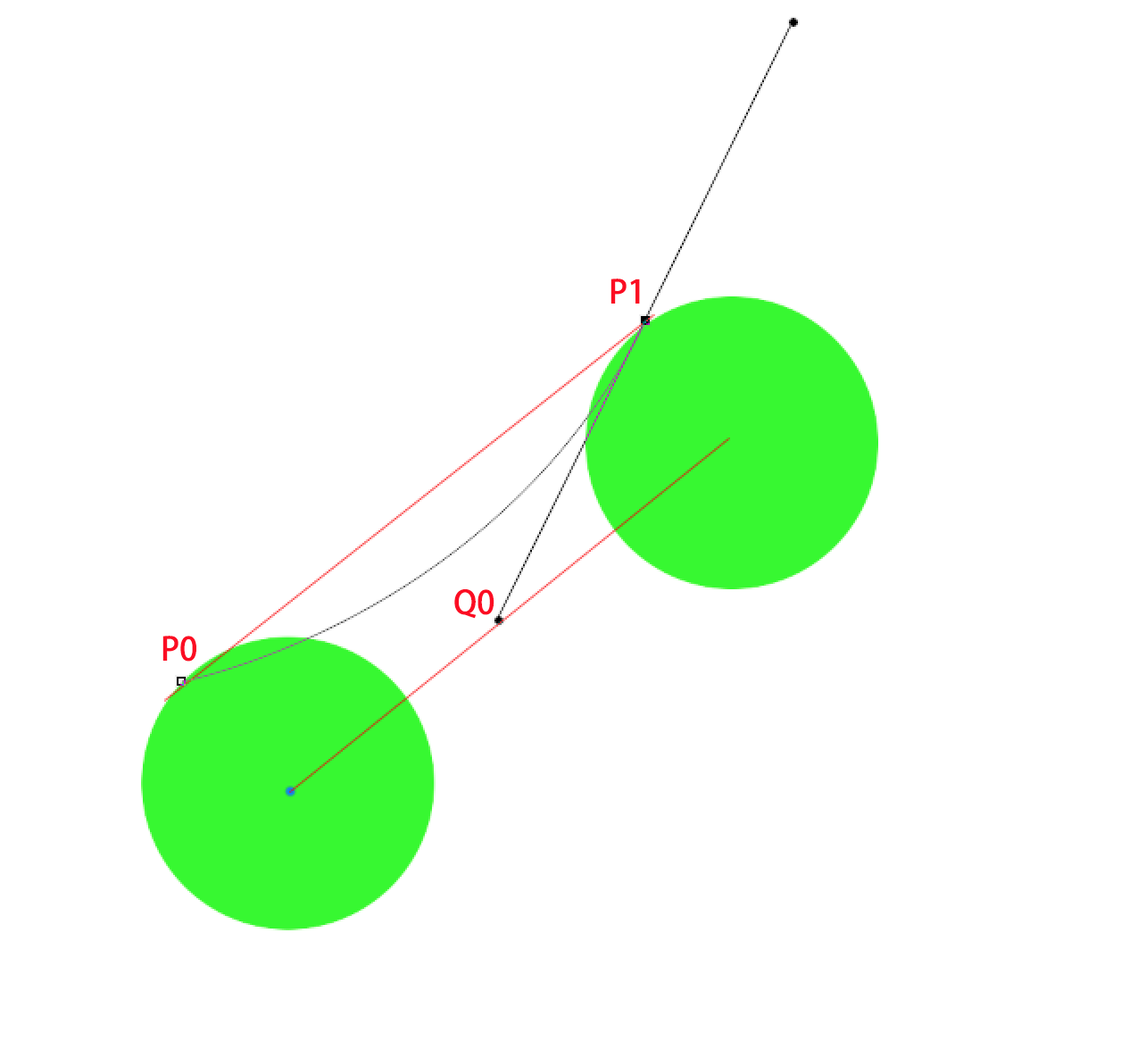
<style>
.page{position:relative;width:1146px;height:1041px;background:#ffffff}
.page>*{position:absolute;margin:0}
.t1{font:32.1px "AdobeHeitiStd-Regular";color:#fb0d23}
</style>
<div class="page">
<p class="t1" style="left:610px;top:278px;width:30px;height:25px">P1</p>
<p class="t1" style="left:454px;top:589px;width:40px;height:29px">Q0</p>
<p class="t1" style="left:162px;top:635px;width:34px;height:26px">P0</p>
</div>
